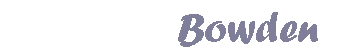
<style>
.page{position:relative;width:337px;height:55px;background:#ffffff}
.page>*{position:absolute;margin:0}
.t1{font:41.7px "ForteMT";color:#7f7f99}
</style>
<div class="page">
<p class="t1" style="left:178px;top:12px;width:140px;height:35px">Bowden</p>
</div>
